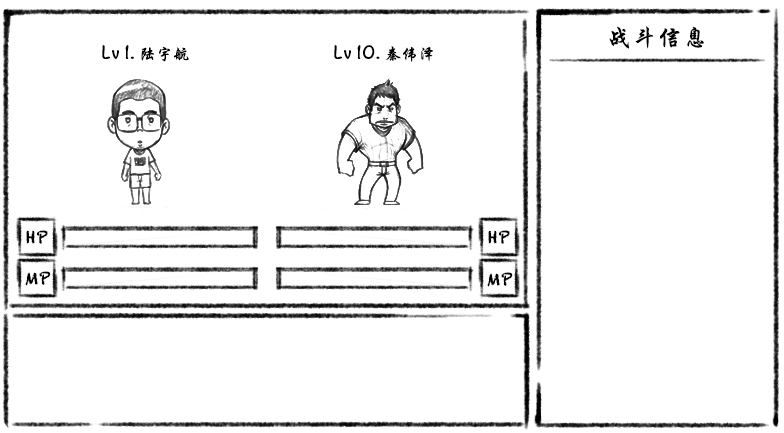
<style>
.page{position:relative;width:784px;height:433px;background:#ffffff}
.page>*{position:absolute;margin:0}
.t1{font:24px "STXingkaiSC-Bold";letter-spacing:0.055em;color:#000000}
.t2{font:16px "Noteworthy-Bold";letter-spacing:0.055em;color:#000000}
.t3{font:16px "STXingkaiSC-Bold";letter-spacing:0.055em;color:#000000}
.t4{font:16px "Chalkduster";letter-spacing:0.055em;color:#000000}
</style>
<div class="page">
<p class="t1" style="left:609px;top:26px;width:95px;height:23px">战斗信息</p>
<p class="t2" style="left:102px;top:45px;width:87px;height:17px">Lv 1. <span class="t3">陆宇航</span></p>
<p class="t2" style="left:334px;top:45px;width:99px;height:17px">Lv 10. <span class="t3">秦伟泽</span></p>
<p class="t4" style="left:26px;top:230px;width:22px;height:14px">HP</p>
<p class="t4" style="left:488px;top:230px;width:22px;height:14px">HP</p>
<p class="t4" style="left:25px;top:271px;width:26px;height:15px">MP</p>
<p class="t4" style="left:487px;top:272px;width:26px;height:15px">MP</p>
</div>
